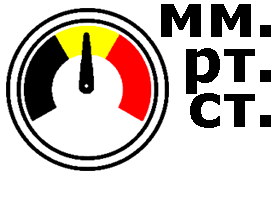
<style>
.page{position:relative;width:280px;height:200px;background:#ffffff}
.page>*{position:absolute;margin:0}
.t1{font:60px/45px "Verdana-Bold";color:#000000}
</style>
<div class="page">
<p class="t1" style="left:161px;top:4px;width:110px;height:124px;text-align:right">мм.<br>рт.<br>ст.</p>
</div>
